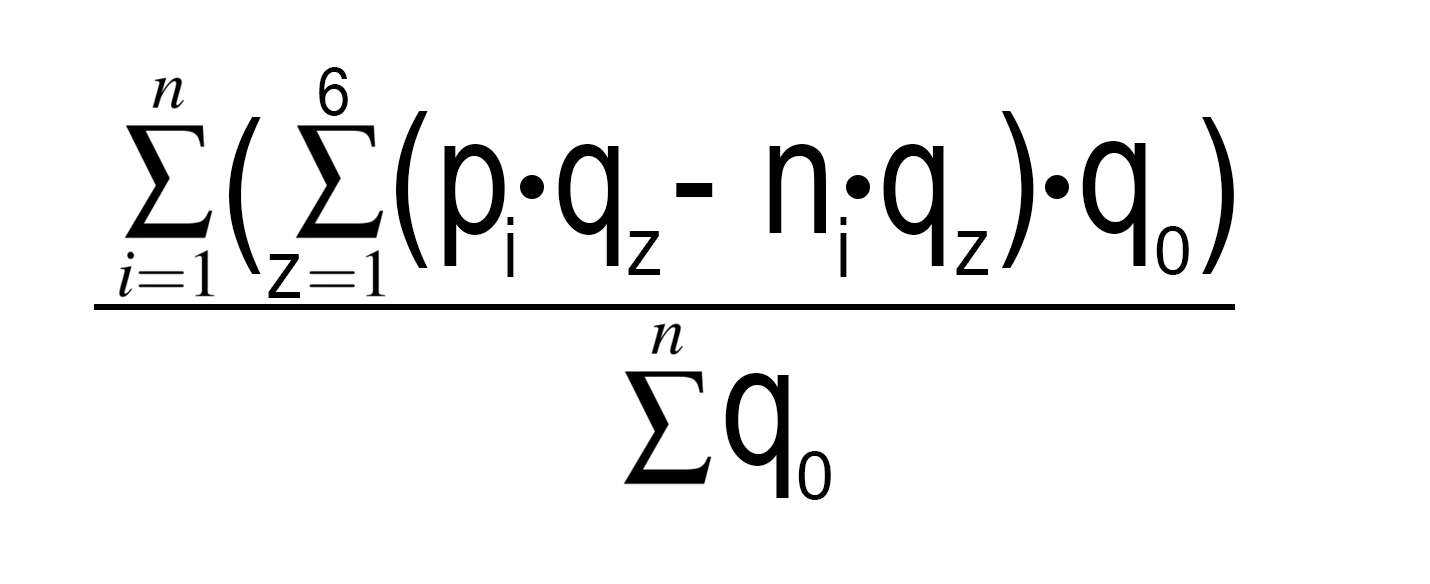
<style>
.page{position:relative;width:1430px;height:584px;background:#ffffff}
.page>*{position:absolute;margin:0}
.t1{font:167.5px "ArialNarrow";letter-spacing:0.02em;color:#000000}
.t2{font:167.4px "ArialNarrow";letter-spacing:0.02em;color:#000000}
.t3{font:171.1px "ArialNarrow";letter-spacing:0.02em;color:#000000}
.t4{font:84.3px "ArialNarrow";letter-spacing:0.02em;color:#000000}
.t5{font:66.3px "ArialNarrow";letter-spacing:0.02em;color:#000000;scale:1.27 1}
</style>
<div class="page">
<p class="t1" style="left:396px;top:111px;width:638px;height:157px">(p q - n q )</p>
<p class="t1" style="left:229px;top:117px;width:32px;height:157px">(</p>
<p class="t2" style="left:1202px;top:117px;width:32px;height:157px;rotate:180deg">(</p>
<p class="t3" style="left:1082px;top:141px;width:64px;height:125px">q</p>
<p class="t4" style="left:507px;top:217px;width:7px;height:60px">i</p>
<p class="t4" style="left:840px;top:217px;width:7px;height:60px">i</p>
<p class="t4" style="left:628px;top:231px;width:32px;height:44px">z</p>
<p class="t4" style="left:956px;top:231px;width:32px;height:44px">z</p>
<p class="t5" style="left:1156px;top:226px;width:33px;height:49px">0</p>
<p class="t3" style="left:725px;top:373px;width:64px;height:125px">q</p>
<p class="t5" style="left:798px;top:451px;width:33px;height:49px">0</p>
</div>
